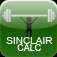
<style>
.page{position:relative;width:57px;height:57px}
.page>*{position:absolute;margin:0}
.t1{font:10px "ArialMT";color:#ffffff}
.t2{font:9px "ArialMT";color:#ffffff}
</style>
<div class="page">
<p class="t1" style="left:6px;top:37px;width:47px;height:7px">SINCLAIR</p>
<p class="t2" style="left:17px;top:44px;width:24px;height:7px">CALC</p>
</div>
